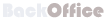
<style>
.page{position:relative;width:108px;height:21px;background:#ffffff}
.page>*{position:absolute;margin:0}
.t1{font:20px "Bauhaus93";color:#bfb5b5}
.t2{font:20px "Bauhaus93";color:#ebedf2}
</style>
<div class="page">
<p class="t1" style="left:3px;top:2px;width:101px;height:16px"><span class="t2">Back</span>Office</p>
</div>
